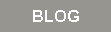
<style>
.page{position:relative;width:111px;height:32px;background:#979590}
.page>*{position:absolute;margin:0}
.t1{font:17px "Arial-BoldMT";color:#ffffff}
</style>
<div class="page">
<p class="t1" style="left:33px;top:10px;width:46px;height:12px">BLOG</p>
</div>
